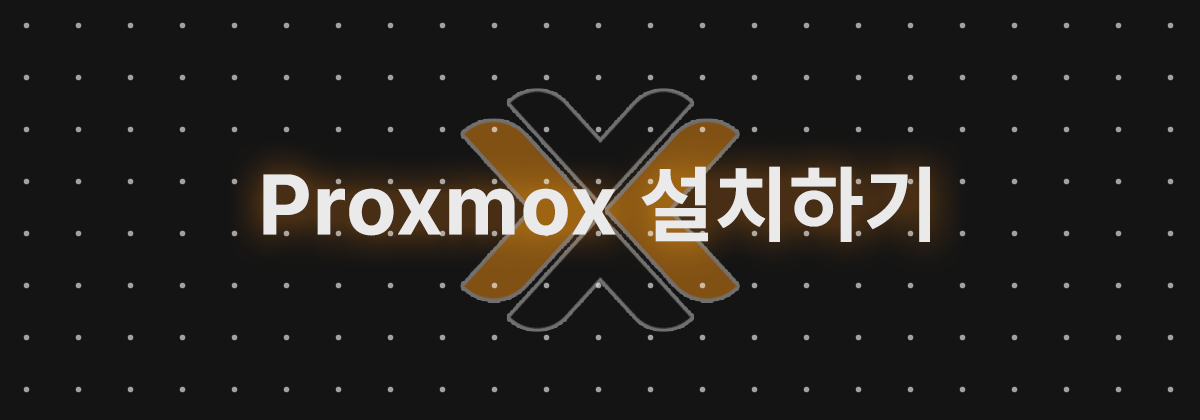
<style>
.page{position:relative;width:1200px;height:420px;background:#141414}
.page>*{position:absolute;margin:0}
.t1{font:84.6px "Pretendard-Bold";letter-spacing:0.02em;color:#eaeaea}
</style>
<div class="page">
<p class="t1" style="left:263px;top:166px;width:667px;height:76px">Proxmox 설치하기</p>
</div>
